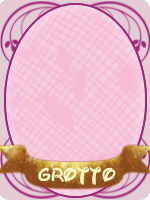
<style>
.page{position:relative;width:150px;height:200px}
.page>*{position:absolute;margin:0}
.t1{font:37.4px "Waltograph";color:#fcfac7}
</style>
<div class="page">
<p class="t1" style="left:38px;top:166px;width:78px;height:19px">grotto</p>
</div>
